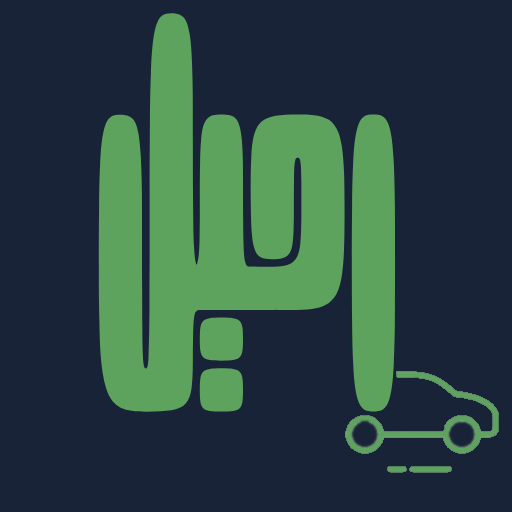
<style>
.page{position:relative;width:512px;height:512px;background:#192338}
.page>*{position:absolute;margin:0}
.t1{font:300px "RAOOFREALSMOOTH";color:#5da35d}
</style>
<div class="page">
<p class="t1" style="left:98px;top:13px;width:298px;height:399px">رحيل</p>
</div>
